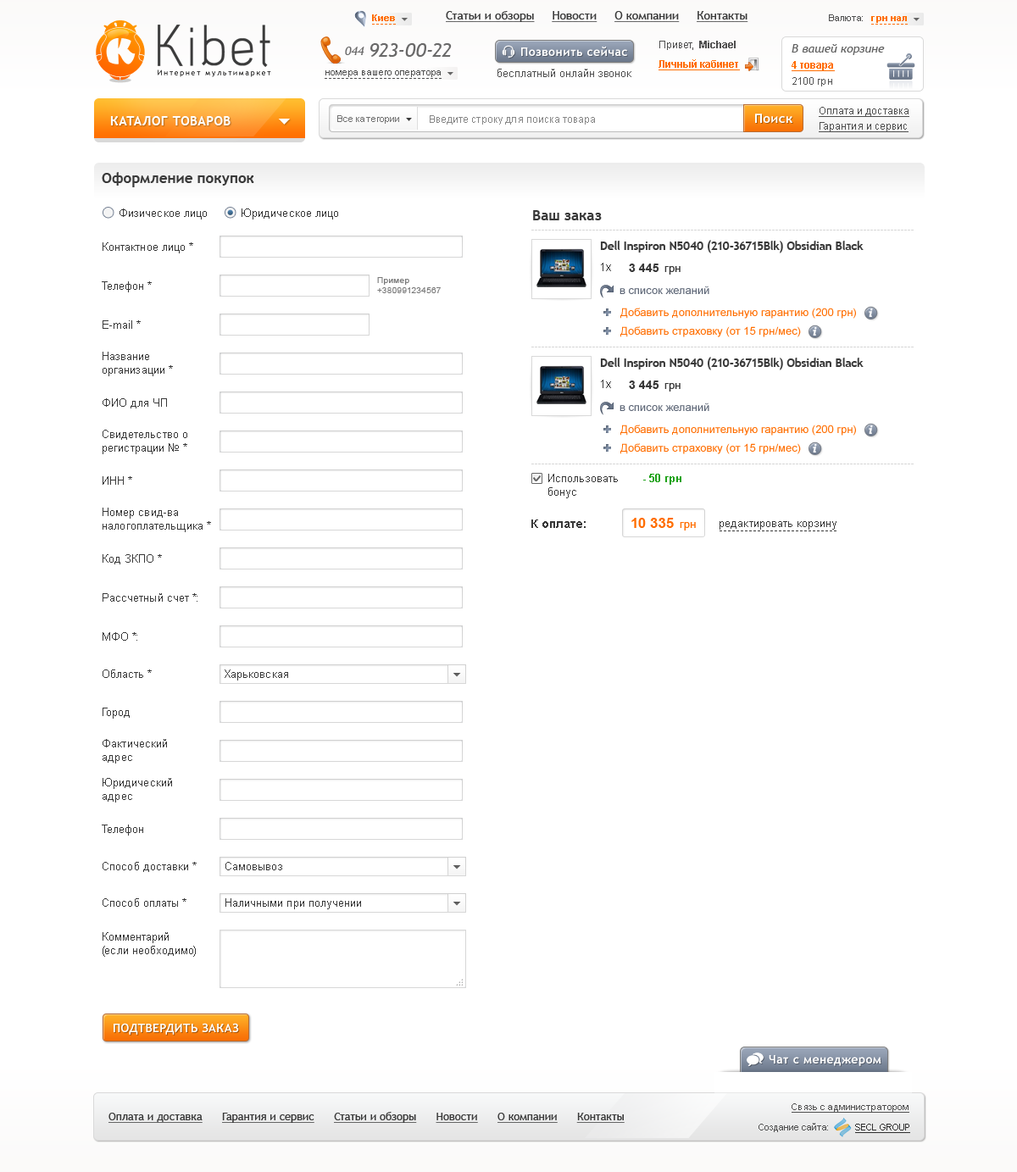
<style>
.page{position:relative;width:1017px;height:1172px;background:#ffffff}
.page>*{position:absolute;margin:0}
.t1{font:9.3px "Arial-BoldMT";color:#ff6e01}
.t2{font:11.9px "TrebuchetMS";color:#393939;text-decoration:underline}
.t3{font:9.3px "ArialMT";color:#4f4f4f}
.t4{font:74.1px "Acid";color:#3b3b3b}
.t5{font:10.2px "ArialMT";color:#4f4f4f}
.t6{font:10.2px "Arial-BoldMT";color:#4f4f4f}
.t7{font:11.9px "TrebuchetMS-Italic";color:#696969}
.t8{font:19.5px "TrebuchetMS-Italic";color:#696969}
.t9{font:11.9px "TrebuchetMS-Bold";letter-spacing:0.03em;color:#ffffff}
.t10{font:11.9px "TrebuchetMS-Italic";color:#616161}
.t11{font:10.2px "Arial-BoldMT";color:#ff6e01;text-decoration:underline}
.t12{font:7.5px "TrebuchetMS";letter-spacing:0.2em;color:#060606}
.t13{font:11px "ArialMT";color:#4f4f4f}
.t14{font:10.2px "ArialMT";color:#535353}
.t15{font:12.7px "TrebuchetMS-Bold";letter-spacing:0.03em;color:#ffffff}
.t16{font:10.2px "ArialMT";color:#4f4f4f;text-decoration:underline}
.t17{font:9.3px "ArialMT";color:#727272}
.t18{font:10.2px "ArialMT";color:#888888}
.t19{font:14.4px "TrebuchetMS-Bold";color:#393939}
.t20{font:11px "ArialMT";color:#393939}
.t21{font:11.4px "TrebuchetMS-Bold";color:#393939}
.t22{font:11.9px "ArialMT";letter-spacing:0.02em;color:#393939}
.t23{font:11.9px "Arial-BoldMT";color:#393939}
.t24{font:8.5px "ArialMT";letter-spacing:0.02em;color:#797979}
.t25{font:11px "ArialMT";color:#5d6676}
.t26{font:11px "ArialMT";color:#ff6e01}
.t27{font:12.7px "ChaparralPro-BoldIt";color:#ffffff}
.t28{font:11px/13.6px "ArialMT";color:#393939}
.t29{font:11px "Arial-BoldMT";color:#1ea218}
.t30{font:14.4px "Arial-BoldMT";color:#ff6e01}
.t31{font:11.9px "TrebuchetMS-Bold";letter-spacing:0.02em;color:#ffffff}
.t32{font:9.3px "ArialMT";color:#4f4f4f;text-decoration:underline}
.t33{font:11px "TrebuchetMS";color:#393939;text-decoration:underline}
.t34{font:9.3px "ArialMT";color:#303030;text-decoration:underline}
</style>
<div class="page">
<p class="t1" style="left:372px;top:14px;width:23px;height:7px">Киев</p>
<p class="t2" style="left:446px;top:11px;width:302px;height:11px">Статьи и обзоры     Новости     О компании     Контакты</p>
<p class="t3" style="left:829px;top:14px;width:34px;height:7px">Валюта:</p>
<p class="t1" style="left:871px;top:16px;width:36px;height:7px">грн нал</p>
<p class="t4" style="left:158px;top:25px;width:112px;height:42px">Kibet</p>
<p class="t5" style="left:659px;top:41px;width:77px;height:9px">Привет,  <span class="t6">Michael</span></p>
<p class="t7" style="left:345px;top:47px;width:19px;height:8px">044</p>
<p class="t8" style="left:370px;top:43px;width:82px;height:14px">923-00-22</p>
<p class="t9" style="left:521px;top:46px;width:106px;height:10px">Позвонить сейчас</p>
<p class="t10" style="left:792px;top:44px;width:93px;height:11px">В вашей корзине</p>
<p class="t11" style="left:659px;top:59px;width:81px;height:11px">Личный кабинет</p>
<p class="t11" style="left:792px;top:61px;width:43px;height:10px">4 товара</p>
<p class="t12" style="left:158px;top:70px;width:113px;height:7px">Интернет мультимаркет</p>
<p class="t3" style="left:325px;top:70px;width:116px;height:7px">номера вашего оператора</p>
<p class="t13" style="left:498px;top:69px;width:133px;height:8px">бесплатный онлайн звонок</p>
<p class="t14" style="left:793px;top:77px;width:39px;height:9px">2100 грн</p>
<p class="t15" style="left:755px;top:114px;width:38px;height:9px">Поиск</p>
<p class="t16" style="left:819px;top:107px;width:91px;height:10px">Оплата и доставка</p>
<p class="t15" style="left:110px;top:116px;width:121px;height:9px">КАТАЛОГ ТОВАРОВ</p>
<p class="t17" style="left:337px;top:115px;width:62px;height:9px">Все категории</p>
<p class="t18" style="left:430px;top:115px;width:165px;height:10px">Введите строку для поиска товара</p>
<p class="t16" style="left:819px;top:122px;width:90px;height:10px">Гарантия и сервис</p>
<p class="t19" style="left:102px;top:172px;width:152px;height:15px">Оформление покупок</p>
<p class="t20" style="left:120px;top:209px;width:87px;height:11px">Физическое лицо</p>
<p class="t20" style="left:242px;top:209px;width:96px;height:11px">Юридическое лицо</p>
<p class="t19" style="left:533px;top:210px;width:69px;height:10px">Ваш заказ</p>
<p class="t20" style="left:103px;top:242px;width:90px;height:11px">Контактное лицо *</p>
<p class="t21" style="left:600px;top:240px;width:264px;height:13px">Dell Inspiron N5040 (210-36715Blk) Obsidian Black</p>
<p class="t22" style="left:601px;top:263px;width:10px;height:8px">1x</p>
<p class="t23" style="left:629px;top:264px;width:52px;height:11px">3 445  <span class="t20">грн</span></p>
<p class="t20" style="left:102px;top:281px;width:50px;height:11px">Телефон *</p>
<p class="t24" style="left:377px;top:277px;width:64px;height:16px">Пример<br>+380991234567</p>
<p class="t25" style="left:620px;top:286px;width:89px;height:8px">в список желаний</p>
<p class="t26" style="left:620px;top:308px;width:236px;height:11px">Добавить дополнительную гарантию (200 грн)</p>
<p class="t27" style="left:869px;top:309px;width:4px;height:8px">i</p>
<p class="t20" style="left:103px;top:320px;width:38px;height:9px">E-mail *</p>
<p class="t26" style="left:620px;top:326px;width:181px;height:11px">Добавить страховку (от 15 грн/мес)</p>
<p class="t27" style="left:813px;top:327px;width:4px;height:9px">i</p>
<p class="t28" style="left:103px;top:352px;width:70px;height:24px">Название<br>организации *</p>
<p class="t21" style="left:600px;top:357px;width:264px;height:13px">Dell Inspiron N5040 (210-36715Blk) Obsidian Black</p>
<p class="t22" style="left:601px;top:380px;width:10px;height:8px">1x</p>
<p class="t23" style="left:629px;top:381px;width:52px;height:11px">3 445  <span class="t20">грн</span></p>
<p class="t20" style="left:103px;top:398px;width:64px;height:11px">ФИО для ЧП</p>
<p class="t25" style="left:620px;top:403px;width:89px;height:8px">в список желаний</p>
<p class="t26" style="left:620px;top:425px;width:236px;height:11px">Добавить дополнительную гарантию (200 грн)</p>
<p class="t27" style="left:869px;top:426px;width:4px;height:8px">i</p>
<p class="t28" style="left:103px;top:430px;width:84px;height:24px">Свидетельство о<br>регистрации № *</p>
<p class="t26" style="left:620px;top:443px;width:181px;height:11px">Добавить страховку (от 15 грн/мес)</p>
<p class="t27" style="left:813px;top:444px;width:4px;height:9px">i</p>
<p class="t20" style="left:548px;top:474px;width:70px;height:24px">Использовать<br>бонус</p>
<p class="t29" style="left:643px;top:474px;width:39px;height:11px">- 50 грн</p>
<p class="t20" style="left:103px;top:476px;width:29px;height:9px">ИНН *</p>
<p class="t28" style="left:103px;top:508px;width:108px;height:24px">Номер свид-ва<br>налогоплательщика *</p>
<p class="t23" style="left:531px;top:520px;width:55px;height:8px">К оплате:</p>
<p class="t30" style="left:631px;top:518px;width:65px;height:13px">10 335  <span class="t26">грн</span></p>
<p class="t20" style="left:720px;top:521px;width:117px;height:9px">редактировать корзину</p>
<p class="t20" style="left:103px;top:554px;width:59px;height:11px">Код ЗКПО *</p>
<p class="t20" style="left:103px;top:593px;width:95px;height:9px">Рассчетный счет *:</p>
<p class="t20" style="left:103px;top:632px;width:34px;height:9px">МФО *:</p>
<p class="t20" style="left:103px;top:670px;width:49px;height:8px">Область *</p>
<p class="t20" style="left:225px;top:670px;width:63px;height:11px">Харьковская</p>
<p class="t20" style="left:103px;top:708px;width:27px;height:11px">Город</p>
<p class="t28" style="left:103px;top:739px;width:64px;height:25px">Фактический<br>адрес</p>
<p class="t28" style="left:103px;top:778px;width:69px;height:25px">Юридический<br>адрес</p>
<p class="t20" style="left:102px;top:825px;width:41px;height:11px">Телефон</p>
<p class="t20" style="left:103px;top:862px;width:94px;height:10px">Способ доставки *</p>
<p class="t20" style="left:225px;top:862px;width:57px;height:9px">Самовывоз</p>
<p class="t20" style="left:103px;top:899px;width:83px;height:8px">Способ оплаты *</p>
<p class="t20" style="left:225px;top:899px;width:136px;height:11px">Наличными при получении</p>
<p class="t28" style="left:103px;top:932px;width:93px;height:25px">Комментарий<br>(если необходимо)</p>
<p class="t31" style="left:114px;top:1023px;width:125px;height:12px">ПОДТВЕРДИТЬ ЗАКАЗ</p>
<p class="t9" style="left:769px;top:1055px;width:113px;height:11px">Чат с менеджером</p>
<p class="t32" style="left:792px;top:1104px;width:118px;height:9px">Связь с администратором</p>
<p class="t33" style="left:108px;top:1112px;width:517px;height:11px">Оплата и доставка      Гарантия и сервис      Статьи и обзоры      Новости      О компании      Контакты</p>
<p class="t3" style="left:759px;top:1123px;width:69px;height:9px">Создание сайта:</p>
<p class="t34" style="left:855px;top:1124px;width:55px;height:9px">SECL GROUP</p>
</div>
